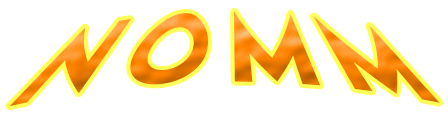
<style>
.page{position:relative;width:448px;height:124px;background:#ffffff}
.page>*{position:absolute;margin:0}
.t1{font:99.7px "LemonMilk"}
</style>
<div class="page">
<p class="t1" style="left:9px;top:11px;width:431px;height:96px">N O M M</p>
</div>
